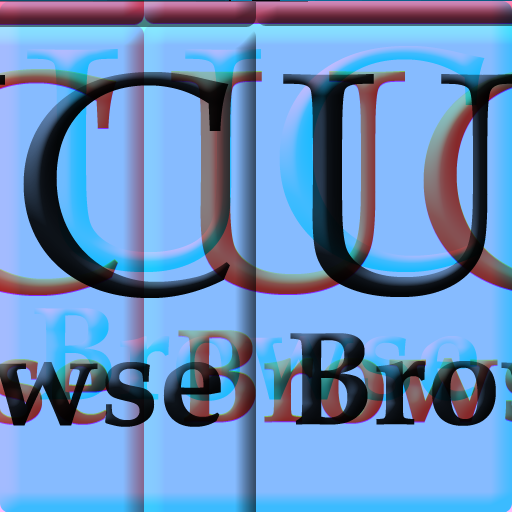
<style>
.page{position:relative;width:512px;height:512px;background:#86bbff}
.page>*{position:absolute;margin:0}
.t1{font:316.7px "BookAntiqua"}
.t2{font:133.3px "BookAntiqua-Bold"}
</style>
<div class="page">
<p class="t1" style="left:27px;top:45px;width:459px;height:226px">UC</p>
<p class="t2" style="left:34px;top:307px;width:443px;height:93px">Browse</p>
</div>
